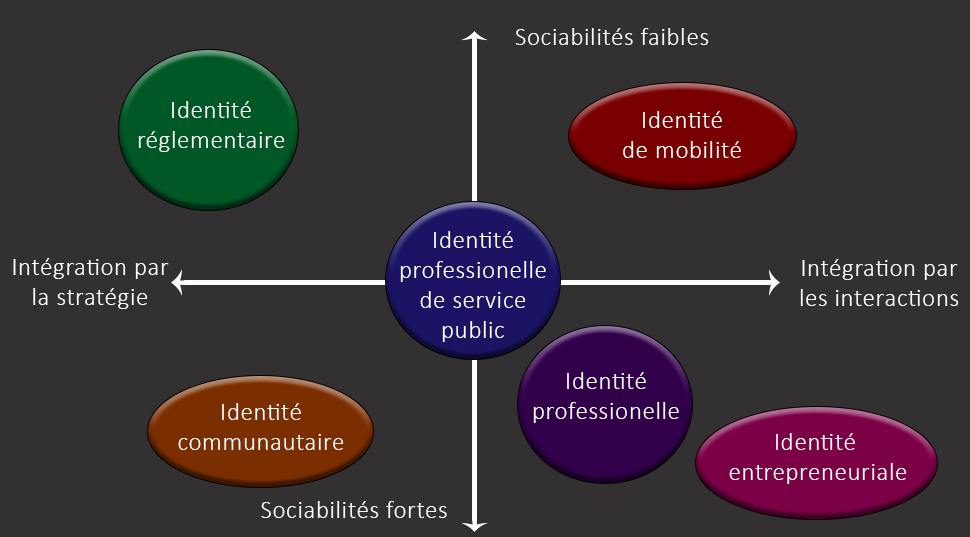
<style>
.page{position:relative;width:970px;height:537px;background:#323030}
.page>*{position:absolute;margin:0}
.t1{font:25px "Calibri-Light";letter-spacing:0.025em;color:#ffffff}
</style>
<div class="page">
<p class="t1" style="left:515px;top:28px;width:194px;height:17px">Sociabilités faibles</p>
<p class="t1" style="left:138px;top:101px;width:147px;height:51px;text-align:center">Identité<br>réglementaire</p>
<p class="t1" style="left:623px;top:111px;width:118px;height:47px;text-align:center">Identité<br>de mobilité</p>
<p class="t1" style="left:400px;top:231px;width:146px;height:111px;text-align:center">Identité <br>professionelle<br>de service<br>public</p>
<p class="t1" style="left:13px;top:258px;width:156px;height:51px;text-align:center">Intégration par<br>la stratégie</p>
<p class="t1" style="left:800px;top:259px;width:159px;height:47px;text-align:center">Intégration par<br>les interactions</p>
<p class="t1" style="left:533px;top:372px;width:146px;height:51px;text-align:center">Identité<br>professionelle</p>
<p class="t1" style="left:178px;top:403px;width:166px;height:47px;text-align:center">Identité<br>communautaire</p>
<p class="t1" style="left:729px;top:433px;width:178px;height:51px;text-align:center">Identité <br>entrepreneuriale</p>
<p class="t1" style="left:261px;top:501px;width:186px;height:17px">Sociabilités fortes</p>
</div>
